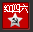
<style>
.page{position:relative;width:33px;height:32px;background:#c50000}
.page>*{position:absolute;margin:0}
.t1{font:10.4px "SimSun";letter-spacing:-0.25em;color:#ffffff}
</style>
<div class="page">
<p class="t1" style="left:4px;top:4px;width:24px;height:9px">红四六</p>
</div>
